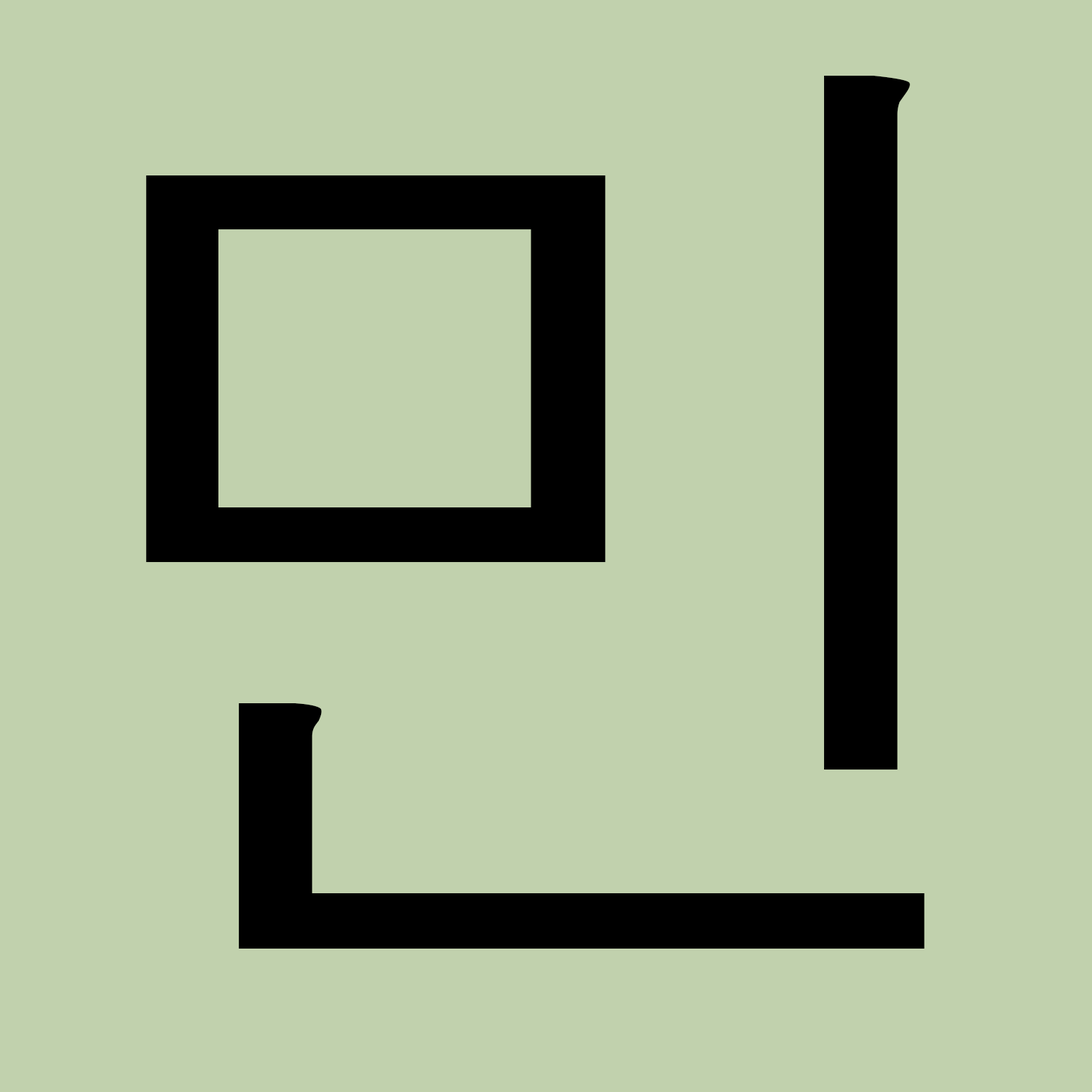
<style>
.page{position:relative;width:1092px;height:1092px;background:#c1d1ad}
.page>*{position:absolute;margin:0}
.t1{font:1036.5px "DotumChe";color:#000000;scale:1.06 1}
</style>
<div class="page">
<p class="t1" style="left:146px;top:76px;width:779px;height:873px">민</p>
</div>
